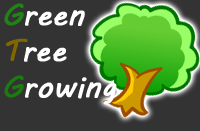
<style>
.page{position:relative;width:200px;height:131px;background:#333333}
.page>*{position:absolute;margin:0}
.t1{font:30px "MVBoli";color:#ffffff;font-weight:bold}
.t2{font:30px "MVBoli";color:#218317;font-weight:bold}
.t3{font:30px "MVBoli";color:#7f6600;font-weight:bold}
.t4{font:30px "MVBoli";color:#1b7a11;font-weight:bold}
</style>
<div class="page">
<p class="t1" style="left:4px;top:3px;width:113px;height:102px"><span class="t2">G</span>reen<br><span class="t3">T</span>ree<br><span class="t4">G</span>rowing</p>
</div>
